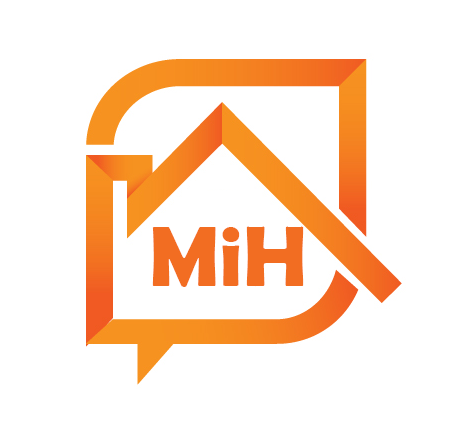
<style>
.page{position:relative;width:465px;height:429px;background:#ffffff}
.page>*{position:absolute;margin:0}
.t1{font:86px "BerlinSansFBDemi-Bold";color:#f26d22}
</style>
<div class="page">
<p class="t1" style="left:152px;top:226px;width:152px;height:61px">MiH</p>
</div>
